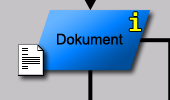
<style>
.page{position:relative;width:170px;height:100px;background:#c6c3c6}
.page>*{position:absolute;margin:0}
.t1{font:24px "Fixedsys";color:#ffff00}
.t2{font:14.7px "ArialMT";color:#000000}
</style>
<div class="page">
<p class="t1" style="left:129px;top:12px;width:12px;height:19px">i</p>
<p class="t2" style="left:57px;top:33px;width:66px;height:12px">Dokument</p>
</div>
